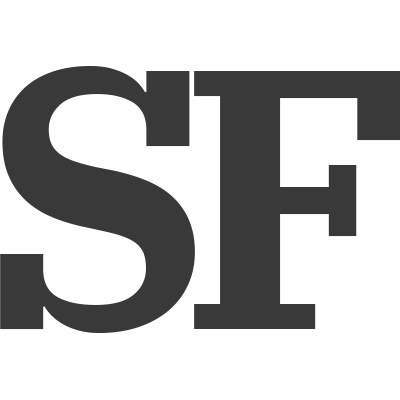
<style>
.page{position:relative;width:400px;height:400px;background:#ffffff}
.page>*{position:absolute;margin:0}
.t1{font:370px "IBMPlexSerif-Bold";color:#393939}
</style>
<div class="page">
<p class="t1" style="left:0px;top:66px;width:195px;height:267px">S</p>
<p class="t1" style="left:194px;top:71px;width:207px;height:258px">F</p>
</div>
